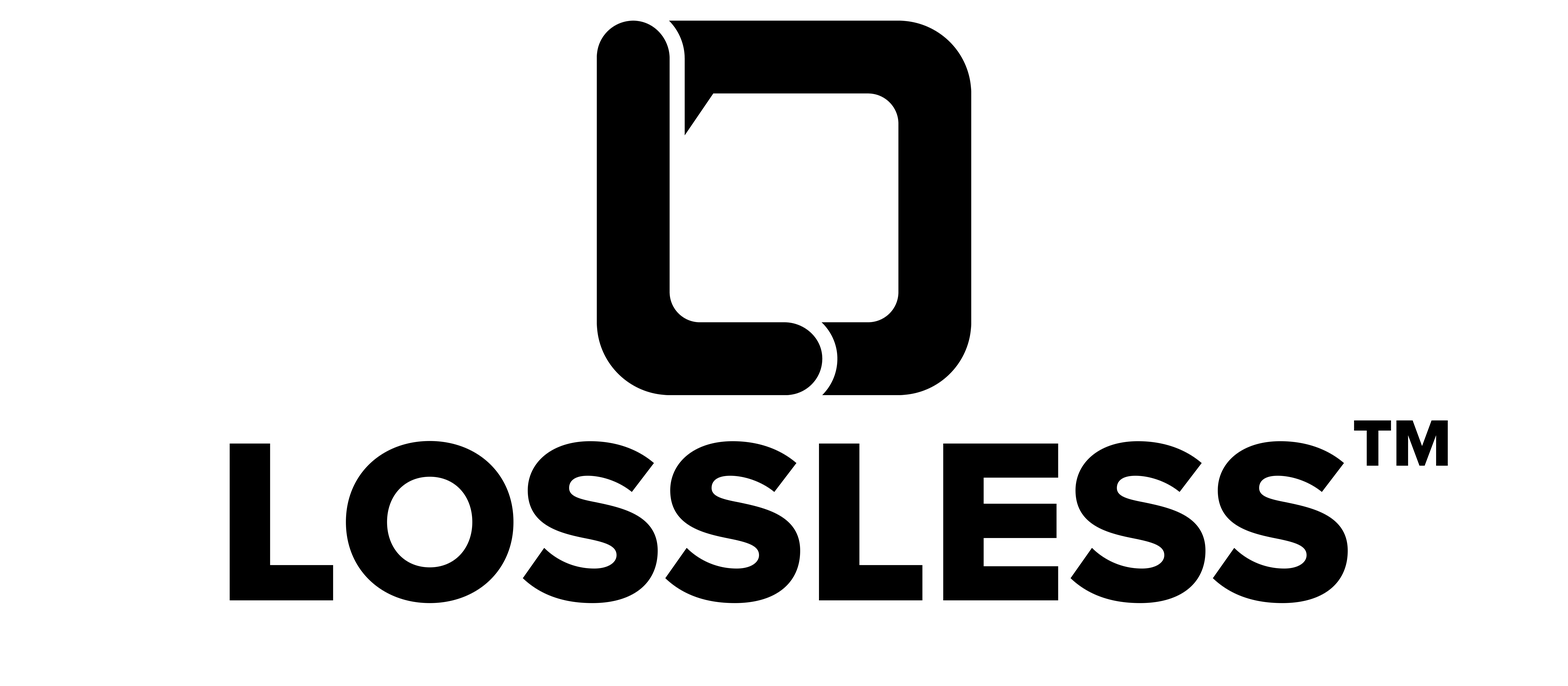
<style>
.page{position:relative;width:1568px;height:686px;background:#ffffff}
.page>*{position:absolute;margin:0}
.t1{font:67.7px "ProximaNova-Extrabld";color:#000000}
.t2{font:235.1px "ProximaNova-Extrabld";color:#000000}
</style>
<div class="page">
<p class="t1" style="left:1354px;top:420px;width:94px;height:46px">TM</p>
<p class="t2" style="left:230px;top:441px;width:1118px;height:162px">LOSSLESS</p>
</div>
